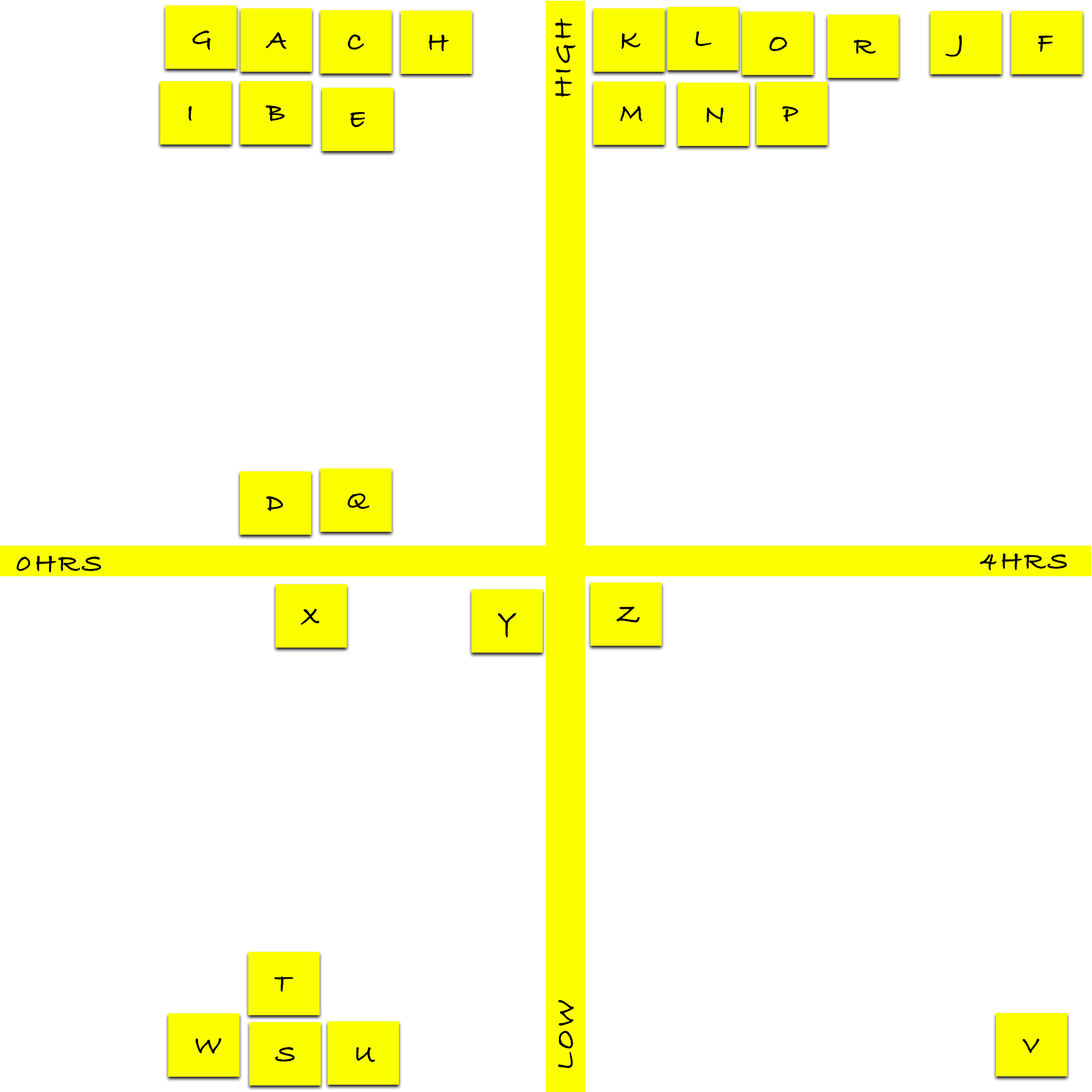
<style>
.page{position:relative;width:1092px;height:1092px;background:#ffffff}
.page>*{position:absolute;margin:0}
.t1{font:27.6px "BradleyHandITCTT-Bold";letter-spacing:0.12em;color:#000000;text-transform:uppercase}
</style>
<div class="page">
<p class="t1" style="left:555px;top:18px;width:20px;height:79px;rotate:-90deg">high</p>
<p class="t1" style="left:192px;top:30px;width:19px;height:20px">G</p>
<p class="t1" style="left:266px;top:32px;width:20px;height:17px">A</p>
<p class="t1" style="left:348px;top:34px;width:16px;height:16px">C</p>
<p class="t1" style="left:428px;top:35px;width:21px;height:16px">H</p>
<p class="t1" style="left:621px;top:33px;width:20px;height:16px">K</p>
<p class="t1" style="left:695px;top:31px;width:17px;height:15px">L</p>
<p class="t1" style="left:769px;top:37px;width:18px;height:14px">O</p>
<p class="t1" style="left:854px;top:40px;width:22px;height:14px">r</p>
<p class="t1" style="left:945px;top:35px;width:17px;height:22px">J</p>
<p class="t1" style="left:1038px;top:35px;width:15px;height:17px">F</p>
<p class="t1" style="left:188px;top:106px;width:4px;height:15px">I</p>
<p class="t1" style="left:265px;top:105px;width:20px;height:16px">B</p>
<p class="t1" style="left:350px;top:112px;width:15px;height:15px">E</p>
<p class="t1" style="left:620px;top:106px;width:22px;height:16px">M</p>
<p class="t1" style="left:707px;top:107px;width:17px;height:16px">N</p>
<p class="t1" style="left:782px;top:106px;width:16px;height:16px">P</p>
<p class="t1" style="left:266px;top:496px;width:17px;height:15px">D</p>
<p class="t1" style="left:348px;top:493px;width:21px;height:16px">Q</p>
<p class="t1" style="left:16px;top:555px;width:85px;height:18px">0HRS</p>
<p class="t1" style="left:980px;top:553px;width:87px;height:17px">4hrs</p>
<p class="t1" style="left:301px;top:609px;width:19px;height:16px">x</p>
<p class="t1" style="left:498px;top:613px;width:18px;height:24px">Y</p>
<p class="t1" style="left:617px;top:606px;width:23px;height:17px">Z</p>
<p class="t1" style="left:274px;top:976px;width:20px;height:16px">T</p>
<p class="t1" style="left:558px;top:1000px;width:16px;height:68px;rotate:-90deg">low</p>
<p class="t1" style="left:195px;top:1038px;width:26px;height:16px">W</p>
<p class="t1" style="left:275px;top:1046px;width:20px;height:16px">S</p>
<p class="t1" style="left:356px;top:1047px;width:19px;height:15px">U</p>
<p class="t1" style="left:1022px;top:1038px;width:17px;height:15px">V</p>
</div>
